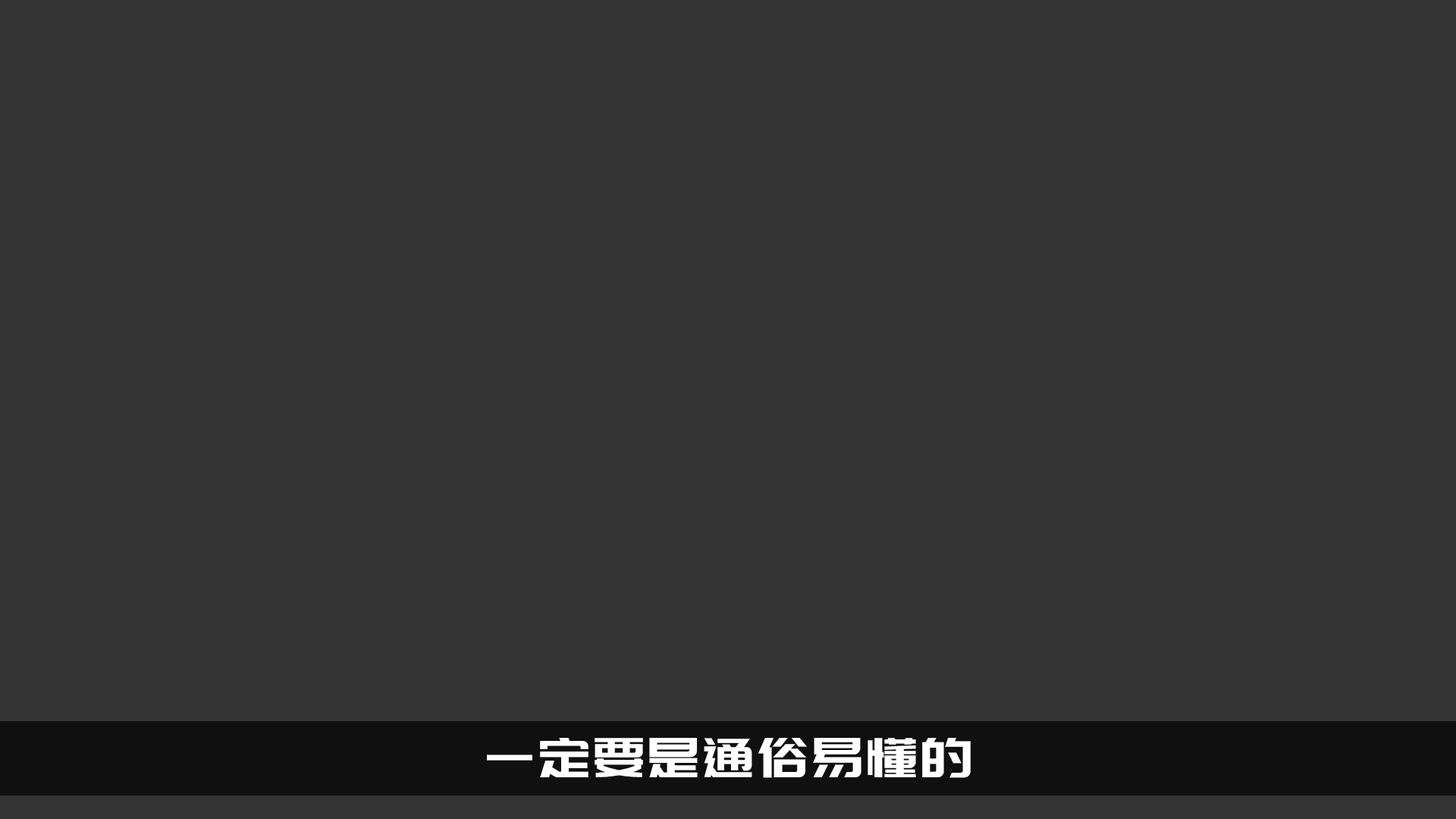
<style>
.page{position:relative;width:1456px;height:819px;background:#333333}
.page>*{position:absolute;margin:0}
.t1{font:54.6px "PangMenZhengDao-3";color:#ffffff}
</style>
<div class="page">
<p class="t1" style="left:487px;top:738px;width:484px;height:40px">一定要是通俗易懂的</p>
</div>
